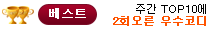
<style>
.page{position:relative;width:210px;height:30px;background:#ffffff}
.page>*{position:absolute;margin:0}
.t1{font:11px/12px "Dotum";color:#000000}
.t2{font:11px/12px "Dotum";color:#ff5400;font-weight:bold}
.t3{font:12px "Dotum";color:#ffffff;font-weight:bold}
</style>
<div class="page">
<p class="t1" style="left:113px;top:4px;width:93px;height:22px;text-align:right">주간 TOP10에<br><span class="t2">2회오른 우수코디</span></p>
<p class="t3" style="left:49px;top:8px;width:37px;height:11px">베스트</p>
</div>
